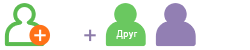
<style>
.page{position:relative;width:250px;height:50px;background:#ffffff}
.page>*{position:absolute;margin:0}
.t1{font:9px "ArialMT";letter-spacing:0.05em;color:#ffffff}
</style>
<div class="page">
<p class="t1" style="left:116px;top:30px;width:22px;height:9px">Друг</p>
</div>
